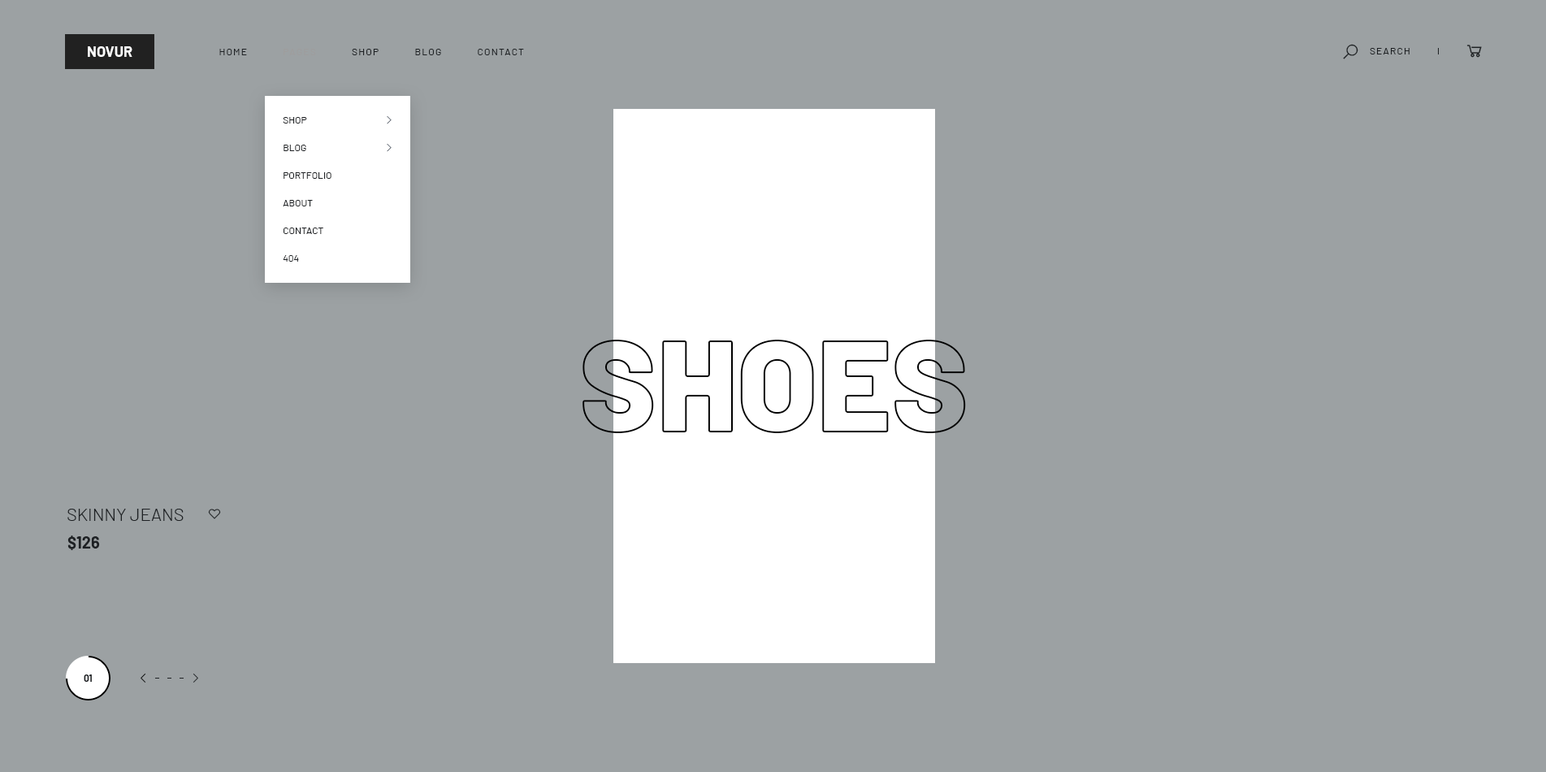
<style>
.page{position:relative;width:1546px;height:772px;background:#9ca1a3}
.page>*{position:absolute;margin:0}
.t1{font:14.6px "Barlow-Bold";color:#fefefe;text-transform:uppercase}
.t2{font:9.7px "Barlow-Regular";letter-spacing:0.1em;color:#1e2124;text-transform:uppercase}
.t3{font:9.7px "Barlow-Regular";letter-spacing:0.1em;color:#9e9d9d;text-transform:uppercase}
.t4{font:9.7px/27.6px "Barlow-Regular";color:#1e2124;text-transform:uppercase}
.t5{font:17.9px "Barlow-Light";color:#1e2124;text-transform:uppercase}
.t6{font:16.2px "Barlow-Bold";color:#1e2124}
.t7{font:9.7px "Barlow-Bold";color:#1e2124;text-transform:uppercase}
</style>
<div class="page">
<p class="t1" style="left:88px;top:46px;width:44px;height:11px">novur</p>
<p class="t2" style="left:219px;top:49px;width:305px;height:6px">Home            <span class="t3">Pages</span>            Shop            Blog            Contact</p>
<p class="t2" style="left:1369px;top:48px;width:40px;height:6px">Search</p>
<p class="t4" style="left:283px;top:117px;width:48px;height:145px">Shop<br>Blog<br>Portfolio<br>About<br>Contact<br>404</p>
<p class="t5" style="left:67px;top:508px;width:117px;height:13px">SKINNY JEANS</p>
<p class="t6" style="left:67px;top:535px;width:33px;height:15px">$126</p>
<p class="t7" style="left:84px;top:674px;width:8px;height:7px">01</p>
</div>
